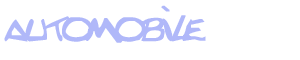
<style>
.page{position:relative;width:300px;height:60px;background:#ffffff}
.page>*{position:absolute;margin:0}
.t1{font:60px "Texted'critureLanfeust";color:#b0b8f9}
</style>
<div class="page">
<p class="t1" style="left:4px;top:5px;width:202px;height:38px">automobile</p>
</div>
